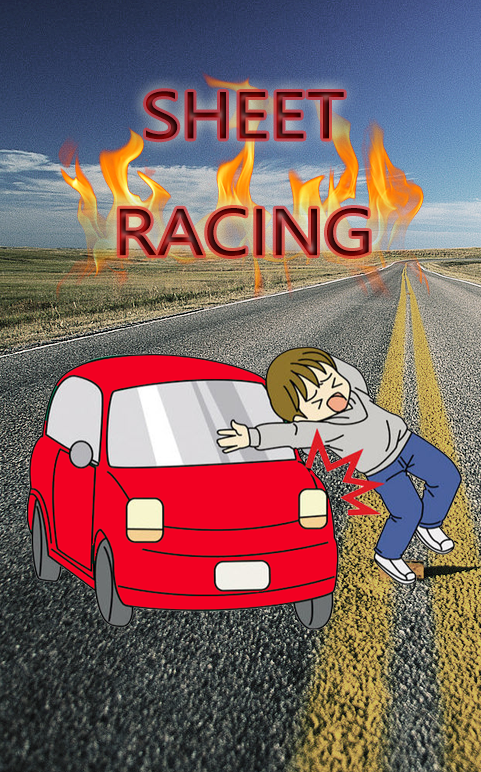
<style>
.page{position:relative;width:481px;height:772px}
.page>*{position:absolute;margin:0}
.t1{font:66.6px "NirmalaUI";scale:1.1 1}
</style>
<div class="page">
<p class="t1" style="left:119px;top:91px;width:250px;height:165px;text-align:center">SHEET<br>RACING</p>
</div>
